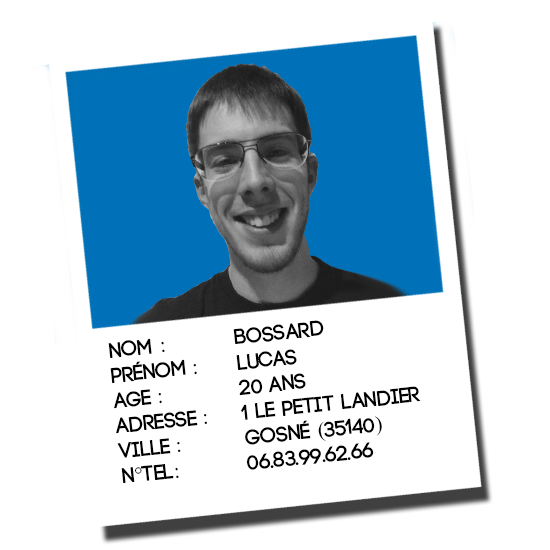
<style>
.page{position:relative;width:550px;height:550px;background:#ffffff}
.page>*{position:absolute;margin:0}
.t1{font:21.1px "Code-Bold";color:#000000}
.t2{font:21.1px "TimesNewRomanPSMT";color:#000000}
</style>
<div class="page">
<p class="t1" style="left:108px;top:320px;width:313px;height:163px;rotate:-6deg">Nom <span class="t2">:    </span>Bossard<br>Prénom<span class="t2"> :   </span>Lucas<br>Age<span class="t2"> :    </span>20 ans <br>Adresse<span class="t2"> :  </span>1 le petit landier <br>Ville<span class="t2"> :   </span>Gosné <span class="t2">(</span>35140<span class="t2">)<br></span>N<span class="t2">°</span>TEL<span class="t2">:    </span>06.83.99.62.66</p>
</div>
